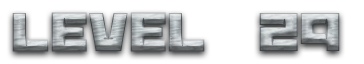
<style>
.page{position:relative;width:364px;height:64px;background:#ffffff}
.page>*{position:absolute;margin:0}
.t1{font:60px "BananaBrick"}
</style>
<div class="page">
<p class="t1" style="left:12px;top:12px;width:328px;height:40px">Level  29</p>
</div>
